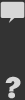
<style>
.page{position:relative;width:25px;height:100px;background:#333333}
.page>*{position:absolute;margin:0}
.t1{font:25px "Bevan";color:#d7d7d7}
</style>
<div class="page">
<p class="t1" style="left:5px;top:76px;width:16px;height:23px">?</p>
</div>
